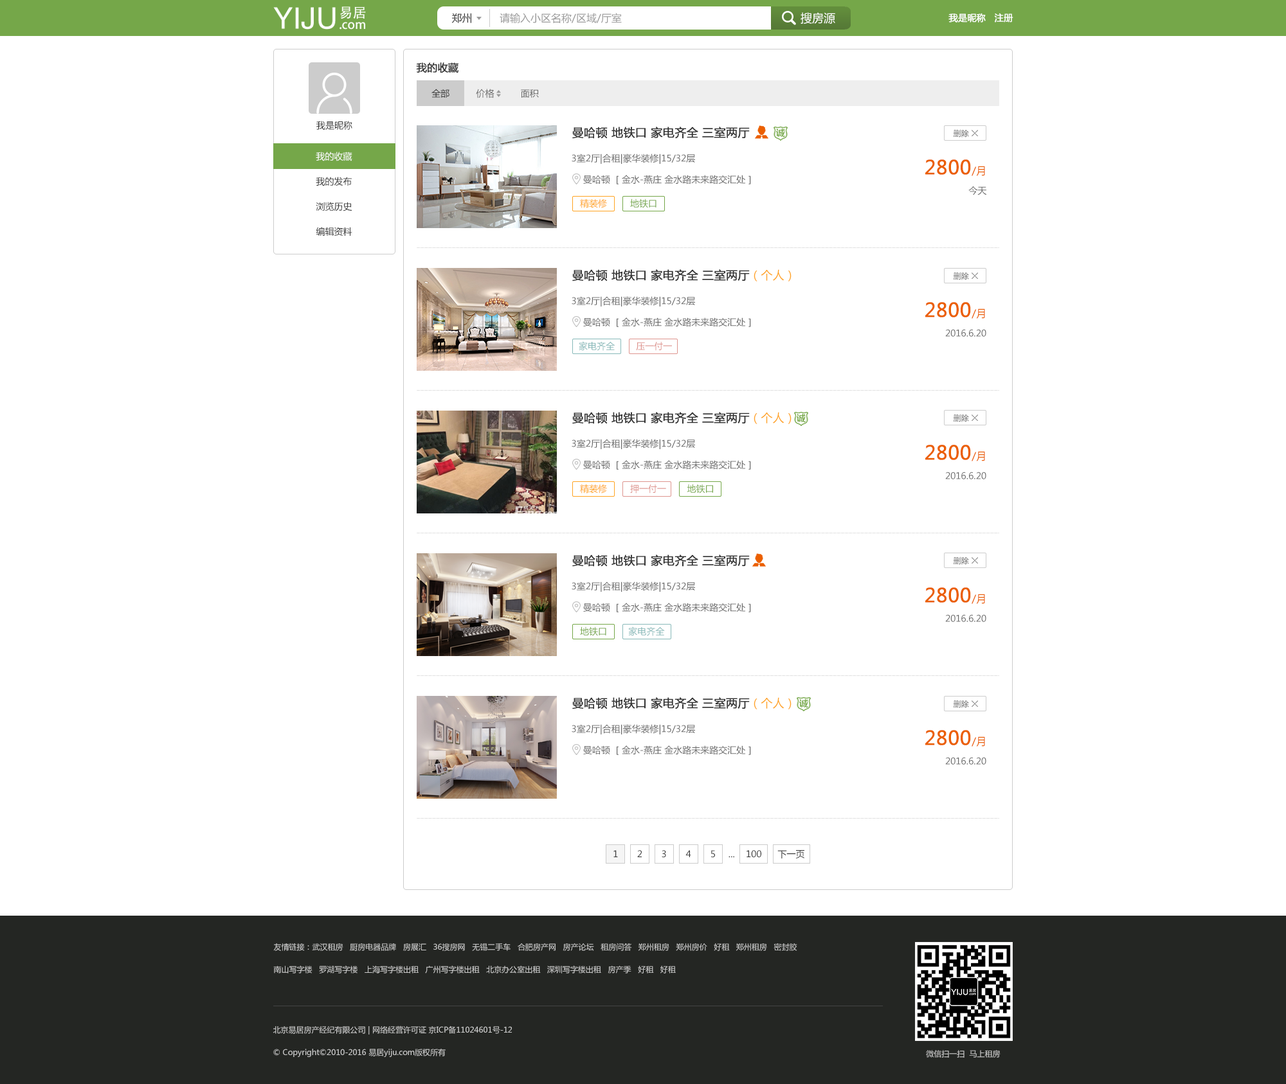
<style>
.page{position:relative;width:1286px;height:1084px;background:#ffffff}
.page>*{position:absolute;margin:0}
.t1{font:10.3px "MicrosoftYaHei";color:#999999}
.t2{font:10.3px "MicrosoftYaHei";color:#333333}
.t3{font:11.6px "MicrosoftYaHei";color:#ffffff}
.t4{font:9px "MicrosoftYaHei";color:#ffffff;font-weight:bold}
.t5{font:10.3px "MicrosoftYaHei";color:#333333;font-weight:bold}
.t6{font:9px "MicrosoftYaHei";color:#666666}
.t7{font:9px "MicrosoftYaHei";color:#333333}
.t8{font:11.6px "MicrosoftYaHei";color:#333333;font-weight:bold}
.t9{font:7.7px "MicrosoftYaHei";color:#666666}
.t10{font:9px/25.1px "MicrosoftYaHei";color:#333333}
.t11{font:9px/25.1px "MicrosoftYaHei";color:#ffffff}
.t12{font:9px/21.2px "MicrosoftYaHei";color:#666666}
.t13{font:19.3px/19.3px "MicrosoftYaHei";color:#eb5f00;font-weight:bold}
.t14{font:10.3px/19.3px "MicrosoftYaHei";color:#eb5f00}
.t15{font:9px/19.3px "MicrosoftYaHei";color:#666666}
.t16{font:9px "MicrosoftYaHei";color:#ffa422}
.t17{font:9px "MicrosoftYaHei";color:#75a749}
.t18{font:11.6px "MicrosoftYaHei";color:#ffa422}
.t19{font:9px "MicrosoftYaHei";color:#88b9b9}
.t20{font:9px "MicrosoftYaHei";color:#de958f}
.t21{font:7.7px/22.5px "MicrosoftYaHei";color:#cccccc}
.t22{font:7.7px "MicrosoftYaHei";color:#cccccc}
</style>
<div class="page">
<p class="t1" style="left:451px;top:13px;width:171px;height:10px"><span class="t2">郑州         </span>请输入小区名称/区域/厅室</p>
<p class="t3" style="left:800px;top:12px;width:35px;height:12px">搜房源</p>
<p class="t4" style="left:948px;top:13px;width:65px;height:9px">我是昵称   注册</p>
<p class="t5" style="left:416px;top:62px;width:42px;height:11px">我的收藏</p>
<p class="t6" style="left:431px;top:89px;width:108px;height:9px"><span class="t7">全部</span>          价格          面积</p>
<p class="t7" style="left:316px;top:121px;width:36px;height:9px">我是昵称</p>
<p class="t8" style="left:572px;top:127px;width:178px;height:12px">曼哈顿 地铁口 家电齐全 三室两厅</p>
<p class="t9" style="left:953px;top:129px;width:16px;height:9px">删除</p>
<p class="t10" style="left:316px;top:152px;width:36px;height:84px"><span class="t11">我的收藏<br></span>我的发布<br>浏览历史<br>编辑资料</p>
<p class="t12" style="left:572px;top:154px;width:179px;height:30px">3室2厅|合租|豪华装修|15/32层<br>     曼哈顿 ［金水-燕庄 金水路未来路交汇处］</p>
<p class="t13" style="left:925px;top:159px;width:62px;height:36px;text-align:right">2800<span class="t14">/月<br>    </span><span class="t15">今天</span></p>
<p class="t16" style="left:580px;top:199px;width:76px;height:9px">精装修 <span class="t17">       地铁口</span></p>
<p class="t8" style="left:572px;top:269px;width:219px;height:13px">曼哈顿 地铁口 家电齐全 三室两厅<span class="t18">（个人）</span></p>
<p class="t9" style="left:953px;top:272px;width:16px;height:8px">删除</p>
<p class="t12" style="left:572px;top:296px;width:179px;height:31px">3室2厅|合租|豪华装修|15/32层<br>     曼哈顿 ［金水-燕庄 金水路未来路交汇处］</p>
<p class="t15" style="left:925px;top:302px;width:61px;height:35px;text-align:right"><span class="t13">2800</span><span class="t14">/月<br>    </span>2016.6.20</p>
<p class="t19" style="left:579px;top:341px;width:93px;height:10px">家电齐全        <span class="t20">压一付一</span></p>
<p class="t8" style="left:572px;top:412px;width:219px;height:12px">曼哈顿 地铁口 家电齐全 三室两厅<span class="t18">（个人）</span></p>
<p class="t9" style="left:953px;top:414px;width:16px;height:8px">删除</p>
<p class="t12" style="left:572px;top:439px;width:179px;height:31px">3室2厅|合租|豪华装修|15/32层<br>     曼哈顿 ［金水-燕庄 金水路未来路交汇处］</p>
<p class="t15" style="left:925px;top:445px;width:61px;height:35px;text-align:right"><span class="t13">2800</span><span class="t14">/月<br>    </span>2016.6.20</p>
<p class="t20" style="left:580px;top:484px;width:133px;height:10px"><span class="t16">精装修        </span>押一付一        <span class="t17">地铁口</span></p>
<p class="t8" style="left:572px;top:555px;width:178px;height:12px">曼哈顿 地铁口 家电齐全 三室两厅</p>
<p class="t9" style="left:953px;top:557px;width:16px;height:8px">删除</p>
<p class="t12" style="left:572px;top:582px;width:179px;height:31px">3室2厅|合租|豪华装修|15/32层<br>     曼哈顿 ［金水-燕庄 金水路未来路交汇处］</p>
<p class="t15" style="left:925px;top:588px;width:61px;height:34px;text-align:right"><span class="t13">2800</span><span class="t14">/月<br>    </span>2016.6.20</p>
<p class="t19" style="left:580px;top:627px;width:85px;height:9px"><span class="t17">地铁口        </span>家电齐全</p>
<p class="t8" style="left:572px;top:698px;width:219px;height:12px">曼哈顿 地铁口 家电齐全 三室两厅<span class="t18">（个人）</span></p>
<p class="t9" style="left:953px;top:700px;width:16px;height:8px">删除</p>
<p class="t12" style="left:572px;top:724px;width:179px;height:31px">3室2厅|合租|豪华装修|15/32层<br>     曼哈顿 ［金水-燕庄 金水路未来路交汇处］</p>
<p class="t15" style="left:925px;top:730px;width:61px;height:35px;text-align:right"><span class="t13">2800</span><span class="t14">/月<br>    </span>2016.6.20</p>
<p class="t7" style="left:613px;top:851px;width:191px;height:8px">1       2       3       4       5     ...     100      下一页</p>
<p class="t21" style="left:273px;top:944px;width:524px;height:30px">友情链接：武汉租房   厨房电器品牌   房展汇   36搜房网   无锡二手车   合肥房产网   房产论坛   租房问答   郑州租房   郑州房价   好租   郑州租房   密封胶   <br>南山写字楼   罗湖写字楼   上海写字楼出租   广州写字楼出租   北京办公室出租   深圳写字楼出租   房产季   好租   好租</p>
<p class="t21" style="left:273px;top:1026px;width:239px;height:32px">北京易居房产经纪有限公司 | 网络经营许可证 京ICP备11024601号-12<br>© Copyright©2010-2016 易居yiju.com版权所有</p>
<p class="t22" style="left:926px;top:1050px;width:74px;height:8px">微信扫一扫  马上租房</p>
</div>
